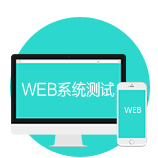
<style>
.page{position:relative;width:158px;height:158px;background:#ffffff}
.page>*{position:absolute;margin:0}
.t1{font:16px "FZLTXHK--GBK1-0";color:#ffffff;scale:0.89 1}
</style>
<div class="page">
<p class="t1" style="left:21px;top:81px;width:94px;height:16px">WEB系统测试</p>
</div>
